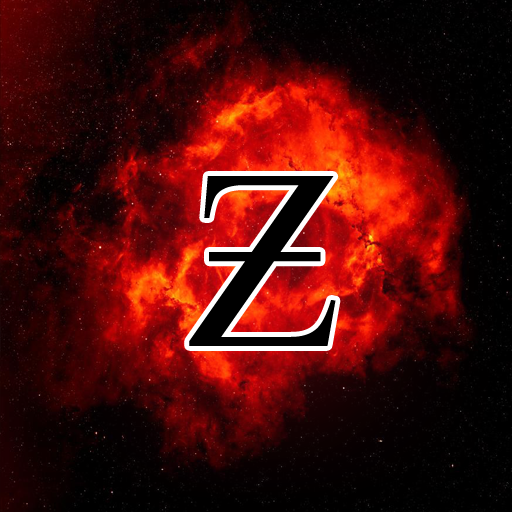
<style>
.page{position:relative;width:512px;height:512px}
.page>*{position:absolute;margin:0}
.t1{font:256px "TimesNewRomanPSMT";color:#000000}
</style>
<div class="page">
<p class="t1" style="left:189px;top:176px;width:147px;height:170px">Ƶ</p>
</div>
